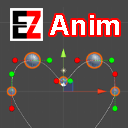
<style>
.page{position:relative;width:128px;height:128px;background:#474747}
.page>*{position:absolute;margin:0}
.t1{font:28px "Arial-BoldMT";color:#ffffff}
</style>
<div class="page">
<p class="t1" style="left:50px;top:15px;width:69px;height:20px">Anim</p>
</div>
